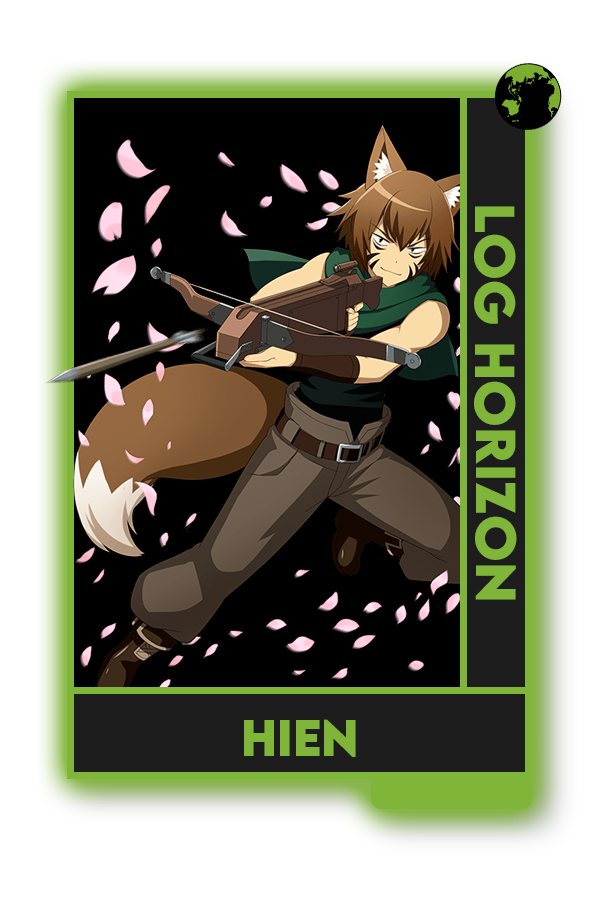
<style>
.page{position:relative;width:600px;height:900px;background:#ffffff}
.page>*{position:absolute;margin:0}
.t1{font:50px "LEMONMILK-Bold";color:#7fad41}
.t2{font:45.8px "LEMONMILK-Bold";color:#7fad41}
</style>
<div class="page">
<p class="t1" style="left:474px;top:206px;width:43px;height:394px;rotate:90deg">Log Horizon</p>
<p class="t2" style="left:244px;top:719px;width:112px;height:38px">Hien</p>
</div>
